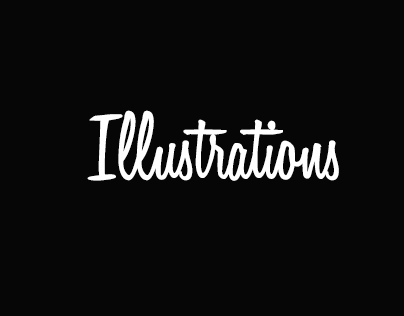
<style>
.page{position:relative;width:404px;height:316px;background:#060606}
.page>*{position:absolute;margin:0}
.t1{font:100px "HoneyScript-SemiBold";color:#ffffff}
</style>
<div class="page">
<p class="t1" style="left:87px;top:110px;width:252px;height:71px">Illustrations</p>
</div>
